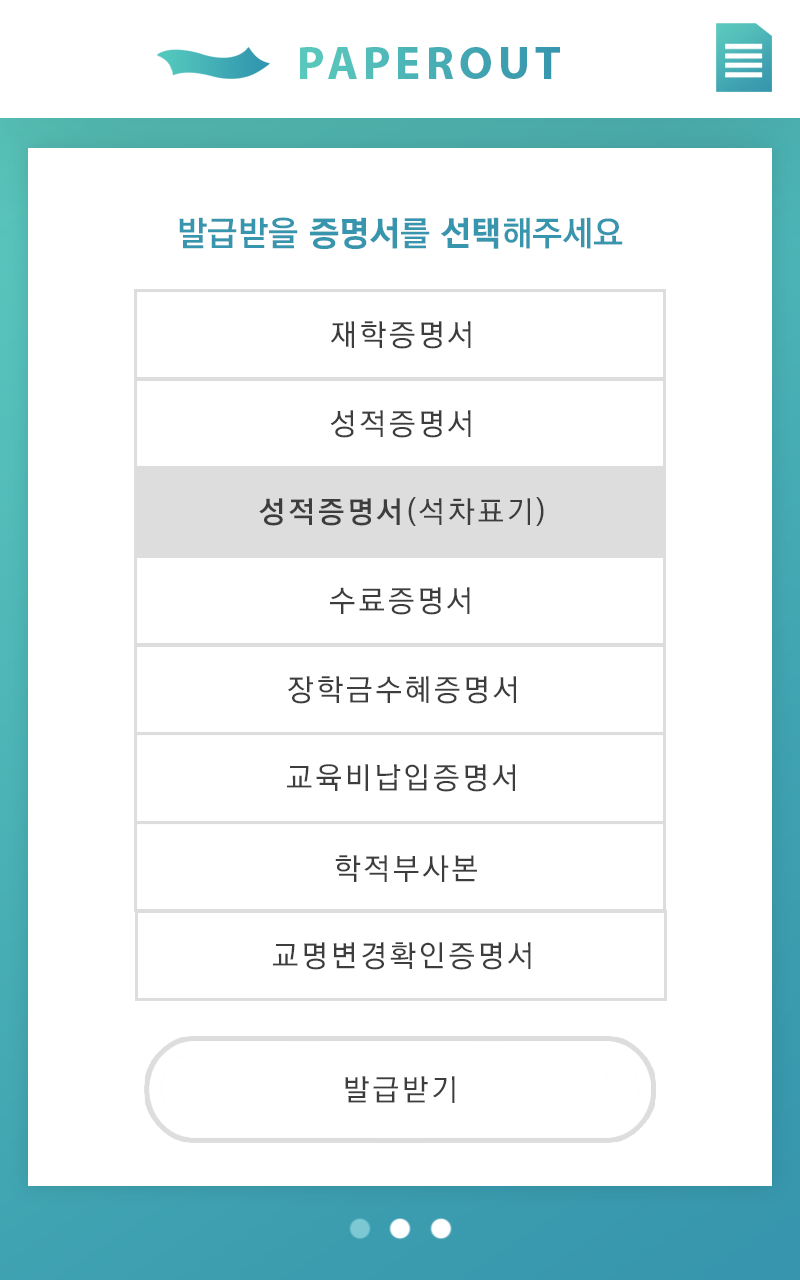
<style>
.page{position:relative;width:800px;height:1280px;background:#ffffff}
.page>*{position:absolute;margin:0}
.t1{font:46.9px "MyriadPro-Bold";letter-spacing:0.11em;color:#49afb5}
.t2{font:34.6px "KoreanGD15-R";color:#3796ad}
.t3{font:34.6px "KoreanGD17-R";color:#3796ad}
.t4{font:30px "KoreanGD13-R";letter-spacing:0.1em;color:#3d3d3d}
.t5{font:30px "KoreanGD15-R";letter-spacing:0.1em;color:#3d3d3d}
</style>
<div class="page">
<p class="t1" style="left:300px;top:47px;width:260px;height:32px">PAPEROUT</p>
<p class="t2" style="left:179px;top:217px;width:444px;height:32px">발급받을 <span class="t3">증명서</span>를 <span class="t3">선택</span>해주세요</p>
<p class="t4" style="left:330px;top:321px;width:141px;height:28px">재학증명서</p>
<p class="t4" style="left:330px;top:410px;width:141px;height:28px">성적증명서</p>
<p class="t4" style="left:259px;top:497px;width:285px;height:29px"><span class="t5">성적증명서</span>(석차표기)</p>
<p class="t4" style="left:330px;top:587px;width:140px;height:28px">수료증명서</p>
<p class="t4" style="left:287px;top:676px;width:229px;height:28px">장학금수혜증명서</p>
<p class="t4" style="left:287px;top:764px;width:228px;height:28px">교육비납입증명서</p>
<p class="t4" style="left:335px;top:855px;width:142px;height:27px">학적부사본</p>
<p class="t4" style="left:273px;top:942px;width:258px;height:28px">교명변경확인증명서</p>
<p class="t4" style="left:345px;top:1076px;width:110px;height:27px">발급받기</p>
</div>
